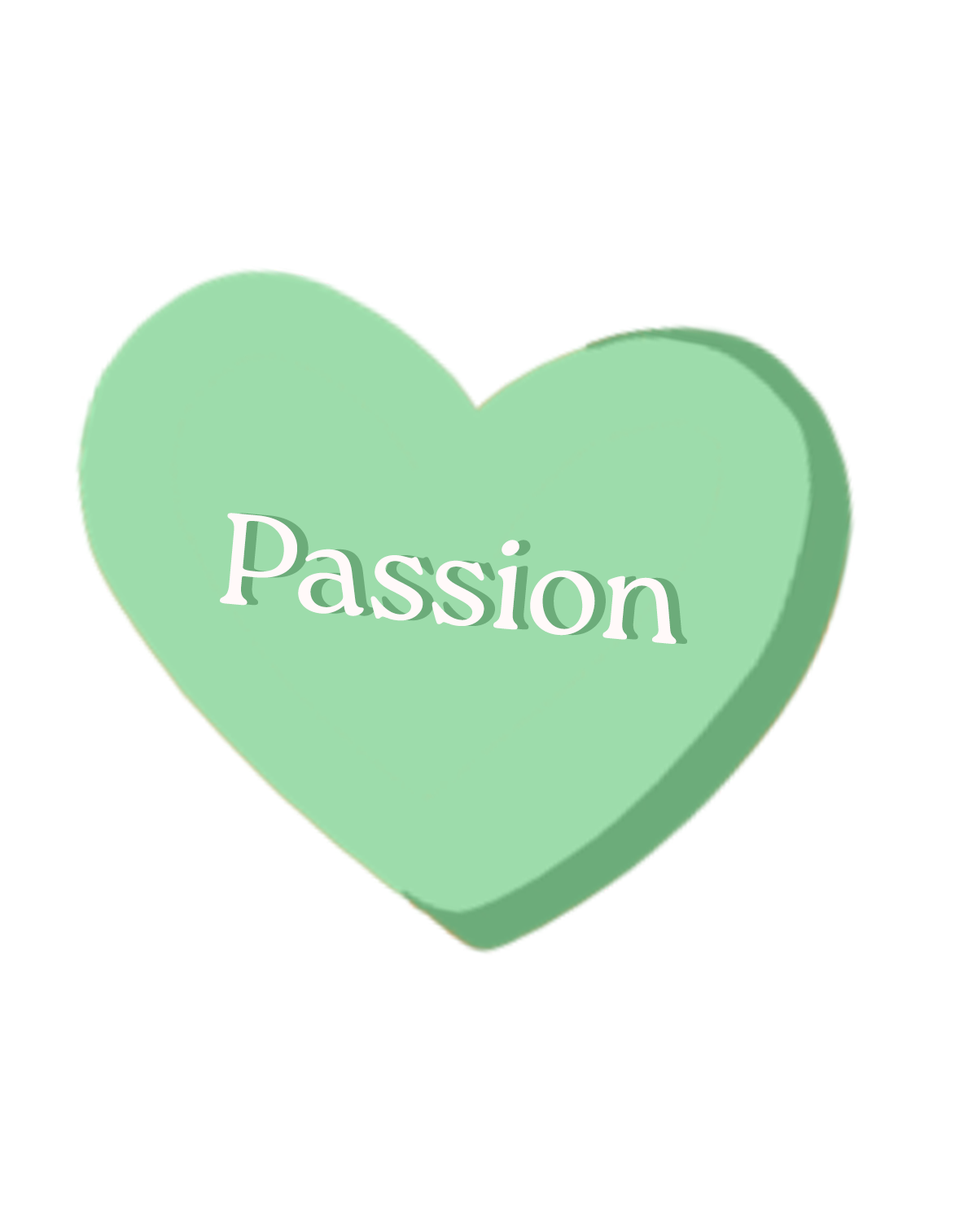
<style>
.page{position:relative;width:977px;height:1221px;background:#ffffff}
.page>*{position:absolute;margin:0}
.t1{font:129.2px "Roca-Light";color:#fff9f9}
.t2{font:129.2px "Roca-Light";color:#6cac7a}
</style>
<div class="page">
<p class="t1" style="left:220px;top:513px;width:456px;height:131px;rotate:5deg">Passion</p>
<p class="t2" style="left:230px;top:513px;width:457px;height:131px;rotate:5deg">Passion</p>
</div>
